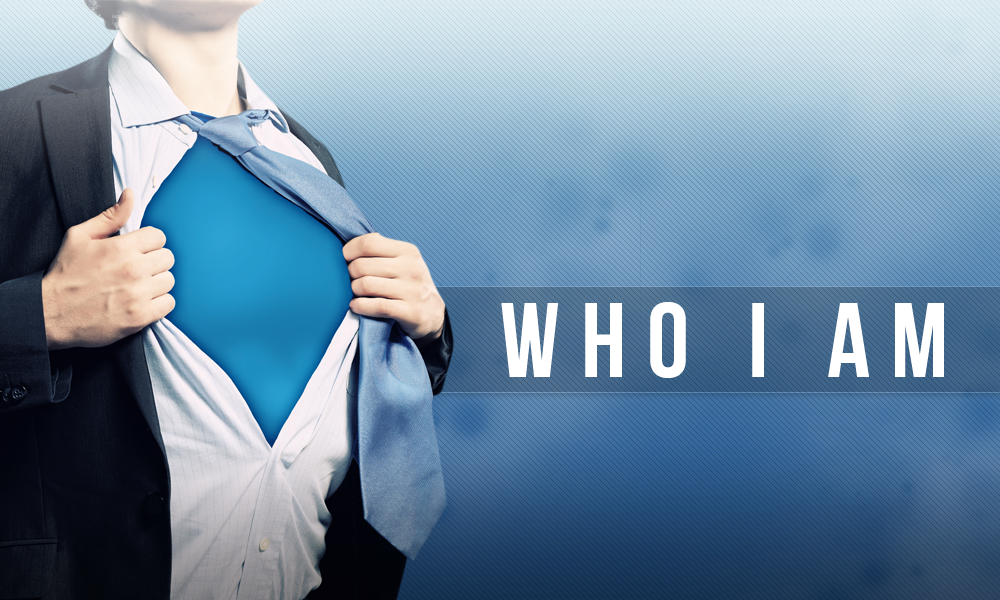
<style>
.page{position:relative;width:1000px;height:600px}
.page>*{position:absolute;margin:0}
.t1{font:106.1px "BebasNeue";letter-spacing:0.2em;color:#ffffff}
</style>
<div class="page">
<p class="t1" style="left:501px;top:302px;width:443px;height:76px">Who I Am</p>
</div>
